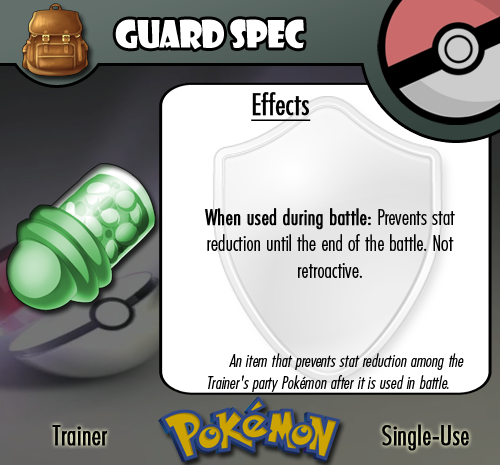
<style>
.page{position:relative;width:500px;height:465px}
.page>*{position:absolute;margin:0}
.t1{font:36.7px "ShowcardGothic-Reg";letter-spacing:-0.025em;color:#ffffff;scale:0.91 1}
.t2{font:22.2px "FuturaCondensedBQ-Light";color:#010101}
.t3{font:27.8px "FuturaCondensedBQ-Light";color:#010101;font-weight:bold}
.t4{font:30.6px "FuturaCondensedBQ-Light";color:#010101;font-weight:bold;text-decoration:underline}
.t5{font:22.2px "FuturaCondensedBQ-Light";color:#010101;font-weight:bold}
.t6{font:18.1px "FuturaCondensedBQ-Light";color:#010101;font-style:italic}
</style>
<div class="page">
<p class="t1" style="left:115px;top:19px;width:189px;height:31px">Guard Spec</p>
<p class="t2" style="left:205px;top:92px;width:250px;height:186px"><span class="t3">  </span><span class="t4">Effects<br><br><br><br><br><br><br></span><span class="t5">When used during battle: </span>Prevents stat reduction until the end of the battle. Not retroactive.</p>
<p class="t6" style="left:208px;top:353px;width:256px;height:39px;text-align:center">An item that prevents stat reduction among the Trainer's party Pokémon after it is used in battle.</p>
<p class="t3" style="left:52px;top:425px;width:55px;height:21px">Trainer</p>
<p class="t3" style="left:382px;top:424px;width:87px;height:27px">Single-Use</p>
</div>
